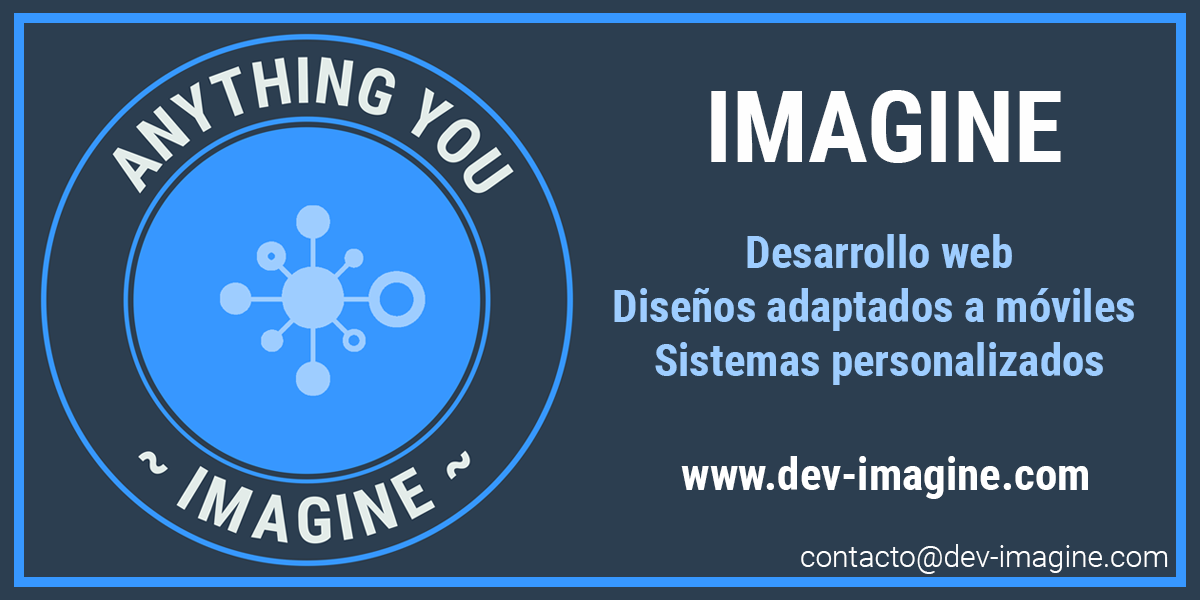
<style>
.page{position:relative;width:1200px;height:600px;background:#2c3e50}
.page>*{position:absolute;margin:0}
.t1{font:100px "RobotoCondensed-Bold";color:#fefefe}
.t2{font:45px "RobotoCondensed-Bold";color:#9ecdff}
.t3{font:45px "RobotoCondensed-Bold";color:#ffffff}
.t4{font:30px "Roboto-Light";color:#ffffff}
</style>
<div class="page">
<p class="t1" style="left:711px;top:90px;width:350px;height:73px">IMAGINE</p>
<p class="t2" style="left:614px;top:234px;width:520px;height:151px;text-align:center">Desarrollo web<br>Diseños adaptados a móviles <br>Sistemas personalizados</p>
<p class="t3" style="left:681px;top:456px;width:407px;height:43px">www.dev-imagine.com</p>
<p class="t4" style="left:801px;top:544px;width:367px;height:30px">contacto@dev-imagine.com</p>
</div>
